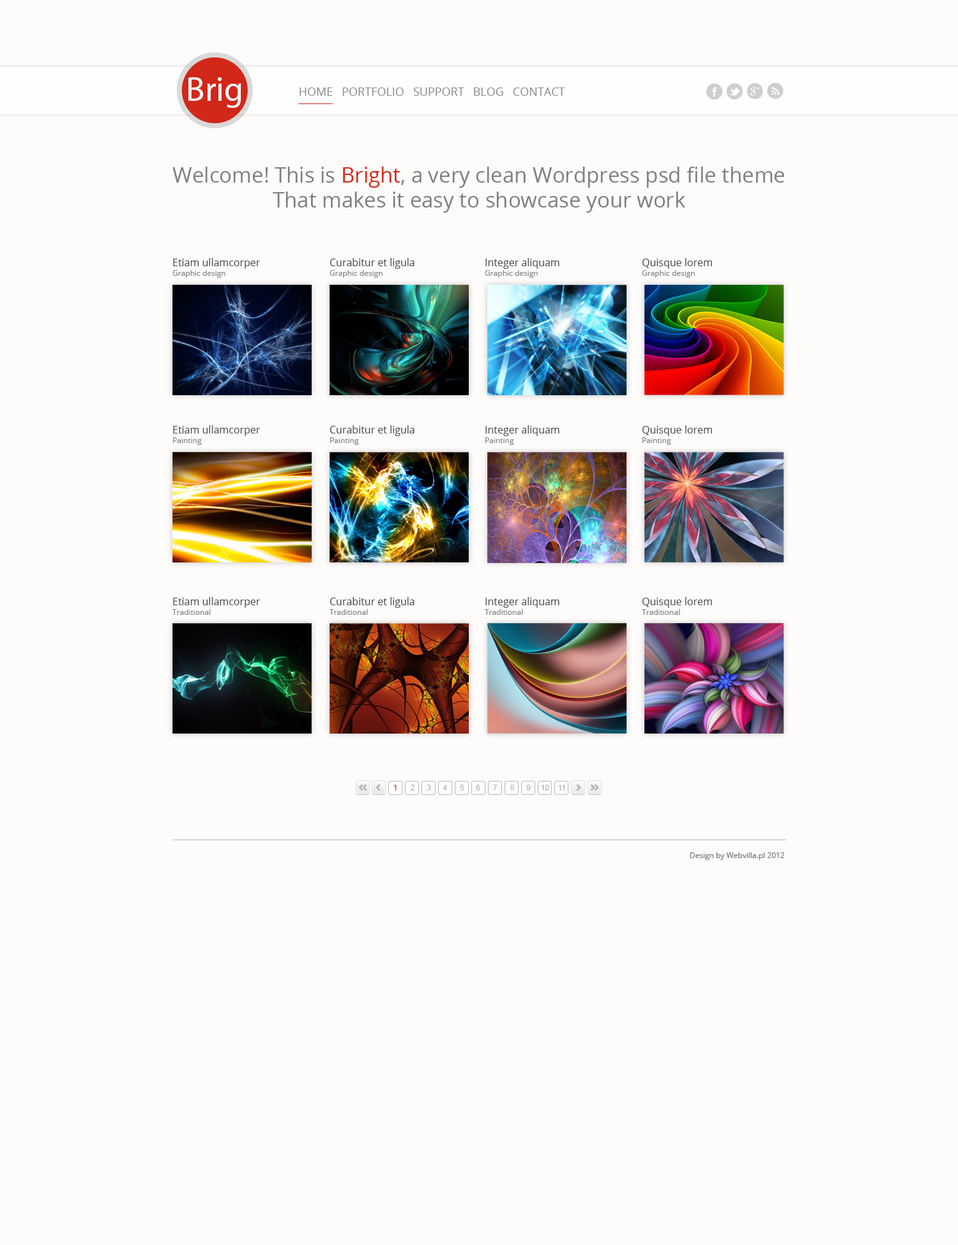
<style>
.page{position:relative;width:958px;height:1245px;background:#fdfcfb}
.page>*{position:absolute;margin:0}
.t1{font:11.5px "OpenSans";color:#8d8c8c;text-transform:uppercase}
.t2{font:21.1px/24.9px "OpenSans";color:#7e7e7e}
.t3{font:21.1px/24.9px "OpenSans";color:#d42819}
.t4{font:10.2px/30.6px "OpenSans";color:#4f4e4e}
.t5{font:7.7px "OpenSans";color:#868585}
.t6{font:7.7px "ArialMT";color:#b5b3b3}
.t7{font:7.7px "OpenSans";color:#d42819}
.t8{font:7.7px "OpenSans";color:#666665}
</style>
<div class="page">
<p class="t1" style="left:299px;top:87px;width:266px;height:9px">home   portfolio   support   blog   contact</p>
<p class="t2" style="left:172px;top:167px;width:612px;height:46px;text-align:center">Welcome! This is <span class="t3">Bright</span>, a very clean Wordpress psd file theme<br>That makes it easy to showcase your work</p>
<p class="t4" style="left:172px;top:258px;width:88px;height:20px">Etiam ullamcorper<br><span class="t5">Graphic design</span></p>
<p class="t4" style="left:329px;top:258px;width:85px;height:20px">Curabitur et ligula<br><span class="t5">Graphic design</span></p>
<p class="t4" style="left:485px;top:258px;width:74px;height:20px">Integer aliquam<br><span class="t5">Graphic design</span></p>
<p class="t5" style="left:642px;top:258px;width:70px;height:20px"><span class="t4">Quisque lorem<br></span>Graphic design</p>
<p class="t4" style="left:173px;top:425px;width:87px;height:20px">Etiam ullamcorper<br><span class="t5">Painting</span></p>
<p class="t4" style="left:329px;top:425px;width:85px;height:20px">Curabitur et ligula<br><span class="t5">Painting</span></p>
<p class="t4" style="left:485px;top:425px;width:74px;height:20px">Integer aliquam<br><span class="t5">Painting</span></p>
<p class="t4" style="left:642px;top:425px;width:70px;height:20px">Quisque lorem<br><span class="t5">Painting</span></p>
<p class="t4" style="left:172px;top:597px;width:88px;height:18px">Etiam ullamcorper<br><span class="t5">Traditional</span></p>
<p class="t4" style="left:329px;top:597px;width:85px;height:18px">Curabitur et ligula<br><span class="t5">Traditional</span></p>
<p class="t4" style="left:485px;top:597px;width:74px;height:18px">Integer aliquam<br><span class="t5">Traditional</span></p>
<p class="t4" style="left:642px;top:597px;width:70px;height:18px">Quisque lorem<br><span class="t5">Traditional</span></p>
<p class="t6" style="left:394px;top:785px;width:170px;height:5px"><span class="t7">1</span>      2      3     4      5     6      7      8      9     10    11</p>
<p class="t8" style="left:690px;top:852px;width:95px;height:8px;opacity:0.89">Design by Webvilla.pl 2012</p>
</div>
